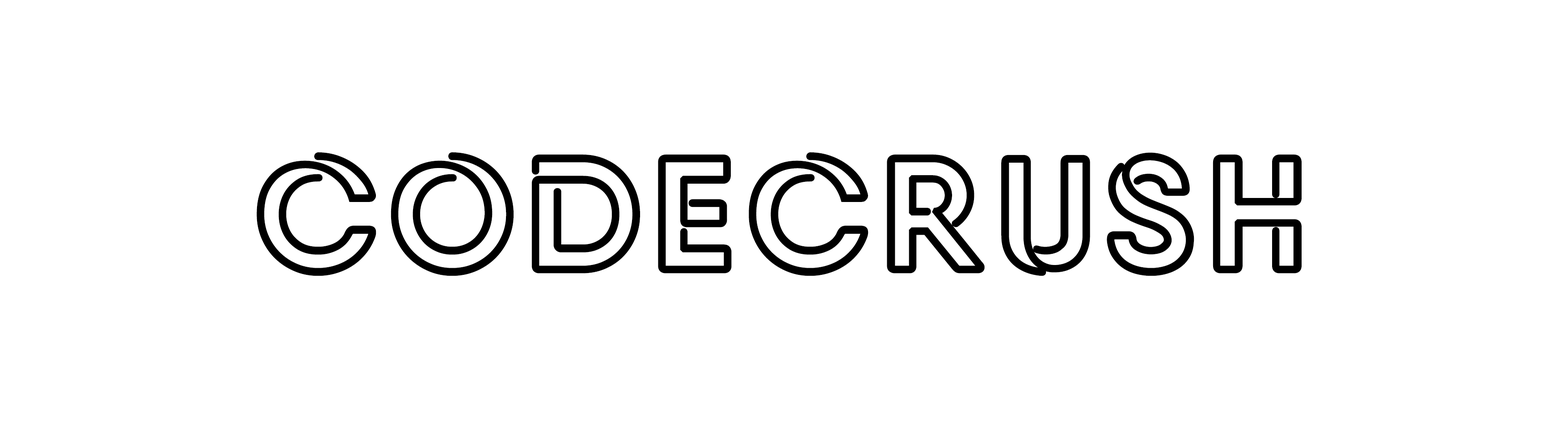
<style>
.page{position:relative;width:1568px;height:429px;background:#ffffff}
.page>*{position:absolute;margin:0}
.t1{font:186.2px "NEON";letter-spacing:0.05em;color:#000000;font-weight:bold}
</style>
<div class="page">
<p class="t1" style="left:257px;top:152px;width:1045px;height:124px">codecrush</p>
</div>
